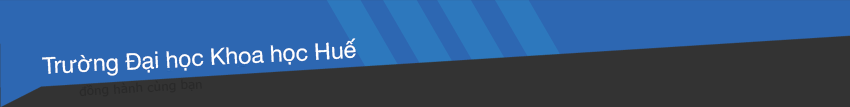
<style>
.page{position:relative;width:850px;height:107px;background:#2d67b2}
.page>*{position:absolute;margin:0}
.t1{font:23px "HelveticaNeue";color:#ffffff}
.t2{font:12px "Verdana";color:#292929}
</style>
<div class="page">
<p class="t1" style="left:42px;top:38px;width:314px;height:38px;rotate:-3deg">Trường Đại học Khoa học Huế</p>
<p class="t2" style="left:79px;top:79px;width:123px;height:18px;rotate:-4deg">đồng hành cùng bạn</p>
</div>
